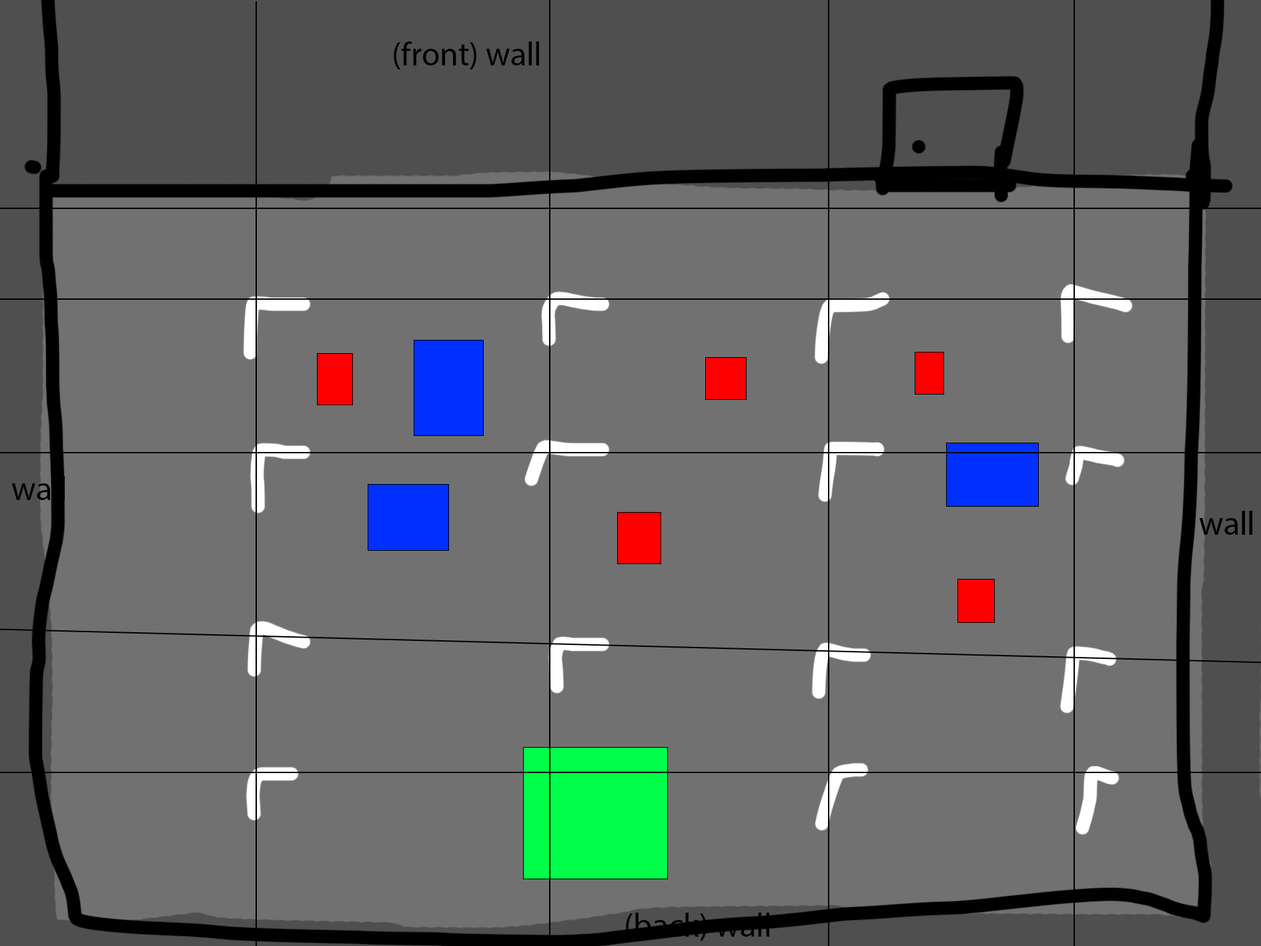
<style>
.page{position:relative;width:1261px;height:946px;background:#717171}
.page>*{position:absolute;margin:0}
.t1{font:33.4px "MyriadPro-Regular";color:#000000}
</style>
<div class="page">
<p class="t1" style="left:394px;top:41px;width:145px;height:28px">(front) wall</p>
<p class="t1" style="left:11px;top:476px;width:54px;height:24px">wall</p>
<p class="t1" style="left:626px;top:912px;width:143px;height:28px">(back) wall</p>
</div>
